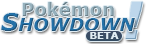
<style>
.page{position:relative;width:146px;height:44px;background:#ffffff}
.page>*{position:absolute;margin:0}
.t1{font:52px "Arial-Black";color:#bdd6eb;font-style:italic}
.t2{font:18px "Verdana-BoldItalic";color:#2471a7}
.t3{font:24px "Verdana-BoldItalic";color:#2471a7}
.t4{font:10px "Verdana-Bold";color:#e0ecf3}
</style>
<div class="page">
<p class="t1" style="left:125px;top:1px;width:18px;height:38px">!</p>
<p class="t2" style="left:1px;top:13px;width:134px;height:18px"><span class="t3">S</span>HOWDOWN</p>
<p class="t4" style="left:90px;top:32px;width:29px;height:7px">BETA</p>
</div>
